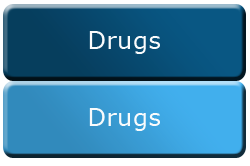
<style>
.page{position:relative;width:250px;height:166px}
.page>*{position:absolute;margin:0}
.t1{font:24px "Verdana";letter-spacing:0.025em;color:#f9fbfc}
</style>
<div class="page">
<p class="t1" style="left:89px;top:31px;width:71px;height:23px">Drugs</p>
<p class="t1" style="left:89px;top:108px;width:71px;height:23px">Drugs</p>
</div>
